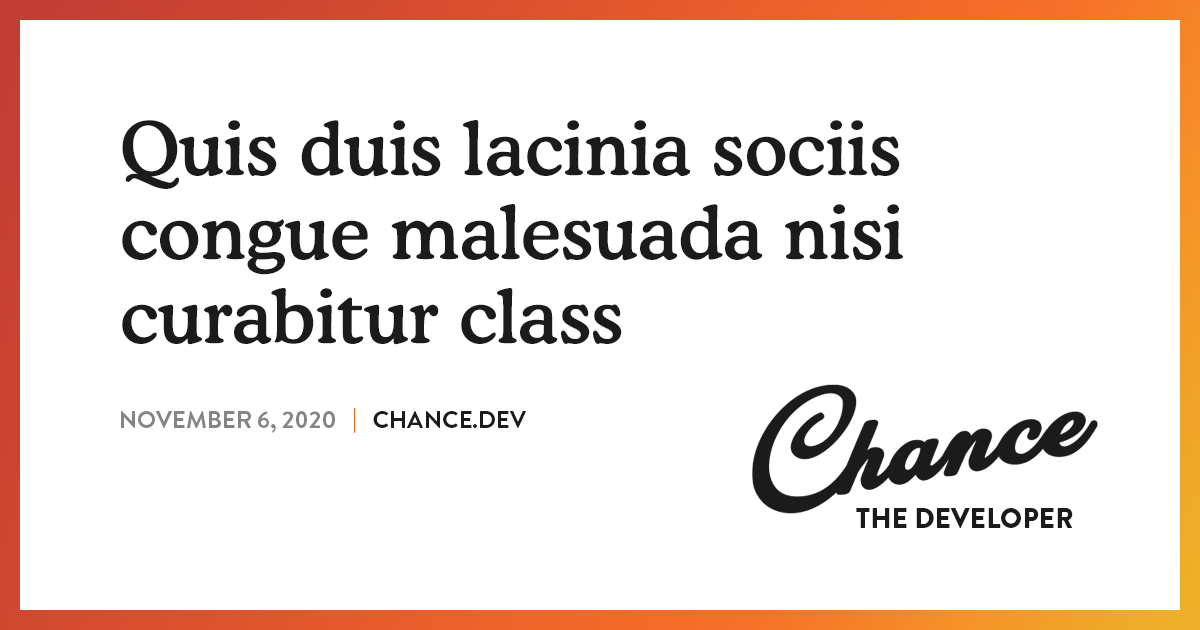
<style>
.page{position:relative;width:1200px;height:630px;background:#ffffff}
.page>*{position:absolute;margin:0}
.t1{font:74px/84px "CooperBT-Medium";color:#1b1b1c}
.t2{font:24px "BrandonGrotesque-Bold";color:#858586;text-transform:uppercase}
.t3{font:24px "BrandonGrotesque-Bold";color:#f67128}
.t4{font:24px "BrandonGrotesque-Bold";color:#1b1b1c;text-transform:uppercase}
.t5{font:28px "BrandonGrotesque-Black";color:#1b1b1c}
</style>
<div class="page">
<p class="t1" style="left:122px;top:120px;width:781px;height:225px">Quis duis lacinia sociis congue malesuada nisi curabitur class</p>
<p class="t2" style="left:121px;top:408px;width:405px;height:25px">November 6, 2020   <span class="t3">|   </span><span class="t4">chance.dev</span></p>
<p class="t5" style="left:856px;top:508px;width:217px;height:20px">THE DEVELOPER</p>
</div>
